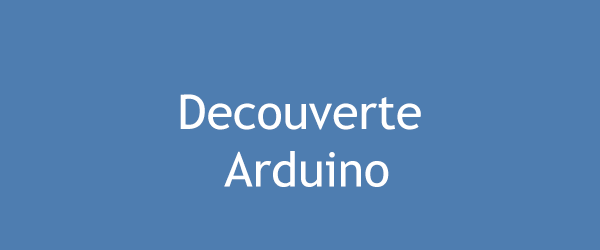
<style>
.page{position:relative;width:600px;height:250px;background:#4e7db0}
.page>*{position:absolute;margin:0}
.t1{font:48px "TrebuchetMS";color:#ffffff}
</style>
<div class="page">
<p class="t1" style="left:180px;top:94px;width:241px;height:93px;text-align:center">Decouverte <br>Arduino</p>
</div>
